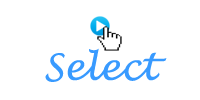
<style>
.page{position:relative;width:200px;height:100px;background:#ffffff}
.page>*{position:absolute;margin:0}
.t1{font:36px "LucidaHandwriting-Italic";color:#389aff}
</style>
<div class="page">
<p class="t1" style="left:45px;top:48px;width:122px;height:34px">Select</p>
</div>
